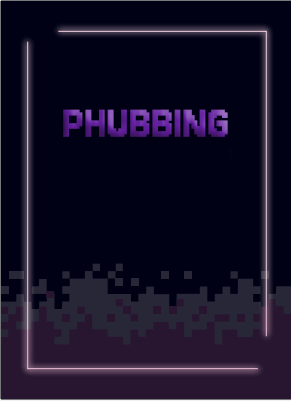
<style>
.page{position:relative;width:291px;height:401px;background:#000115}
.page>*{position:absolute;margin:0}
.t1{font:50px "Jersey10-Regular";letter-spacing:0.025em}
</style>
<div class="page">
<p class="t1" style="left:63px;top:109px;width:165px;height:28px">PHUBBING</p>
</div>
